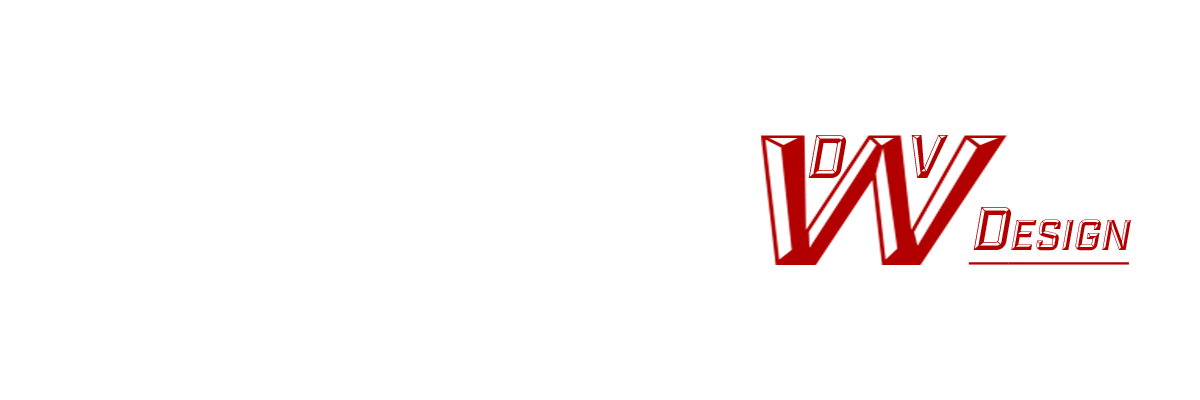
<style>
.page{position:relative;width:1200px;height:400px;background:#ffffff}
.page>*{position:absolute;margin:0}
.t1{font:60px "IndustryInc-Bevel";color:#b20000;font-variant:small-caps;font-style:italic}
.t2{font:60px "IndustryInc-Bevel";color:#b20000;font-variant:small-caps;font-style:italic;text-decoration:underline}
</style>
<div class="page">
<p class="t1" style="left:808px;top:135px;width:38px;height:43px">D</p>
<p class="t1" style="left:911px;top:135px;width:37px;height:43px">V</p>
<p class="t2" style="left:968px;top:207px;width:163px;height:58px">Design</p>
</div>
